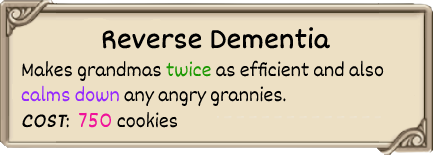
<style>
.page{position:relative;width:433px;height:155px;background:#ede0c4}
.page>*{position:absolute;margin:0}
.t1{font:30px "Dekko";color:#000000;font-weight:bold}
.t2{font:21px "Dekko";color:#000000}
.t3{font:21px "Dekko";color:#1b9902}
.t4{font:21px "Dekko";color:#9428ff}
.t5{font:21px "Dekko";color:#000000;font-weight:bold;font-style:italic}
.t6{font:21px "Dekko";color:#f0129a}
</style>
<div class="page">
<p class="t1" style="left:102px;top:27px;width:228px;height:22px">Reverse Dementia</p>
<p class="t2" style="left:21px;top:60px;width:363px;height:68px">Makes grandmas <span class="t3">twice </span>as efficient and also <br><span class="t4">calms down </span>any angry grannies.<br><span class="t5">COST</span>:  <span class="t6">750 </span>cookies</p>
</div>
